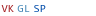
<style>
.page{position:relative;width:96px;height:16px;background:#ffffff}
.page>*{position:absolute;margin:0}
.t1{font:11px "Consolas";letter-spacing:0.03em;color:#a41e22;text-transform:uppercase}
.t2{font:11px "Consolas";letter-spacing:0.03em;color:#4386b5;text-transform:uppercase}
.t3{font:11px "Consolas";letter-spacing:0.03em;text-transform:uppercase}
</style>
<div class="page">
<p class="t1" style="left:1px;top:5px;width:13px;height:7px">vk</p>
<p class="t2" style="left:17px;top:5px;width:13px;height:7px">gl</p>
<p class="t3" style="left:34px;top:5px;width:12px;height:7px">sp</p>
</div>
